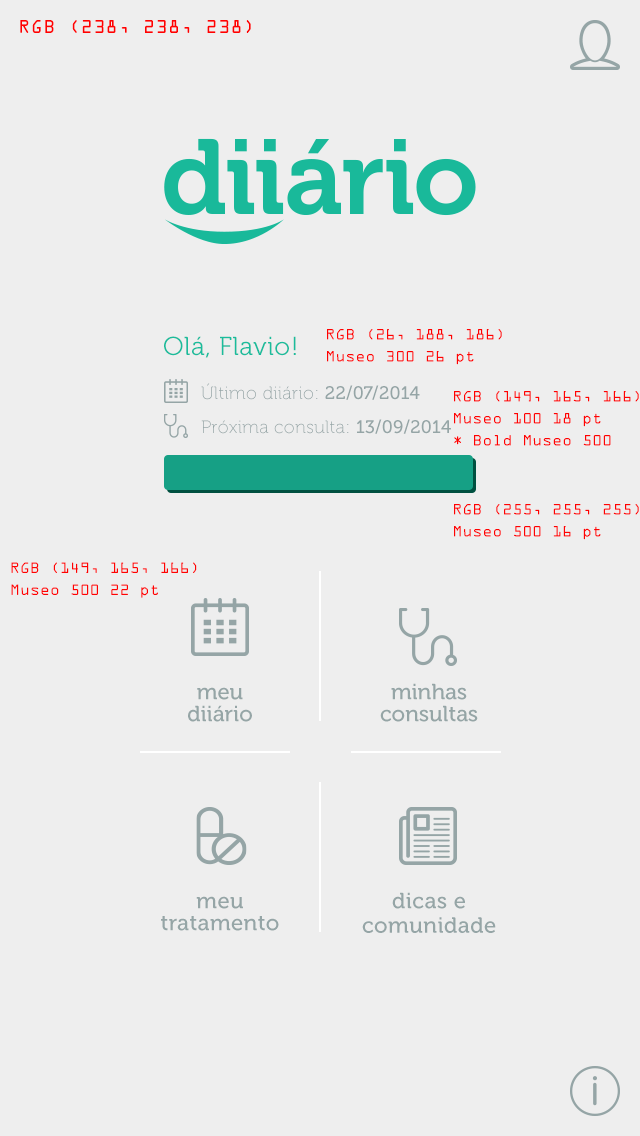
<style>
.page{position:relative;width:640px;height:1136px;background:#eeeeee}
.page>*{position:absolute;margin:0}
.t1{font:20px "OCRAExtended";letter-spacing:0.02em;color:#ff0101}
.t2{font:16px/22px "OCRAExtended";letter-spacing:0.02em;color:#ff0101}
.t3{font:26px "Museo300-Regular";letter-spacing:0.02em;color:#1abc9c}
.t4{font:18px "Museo100-Regular";letter-spacing:0.02em;color:#95a5a6}
.t5{font:18px "Museo500-Regular";letter-spacing:0.02em;color:#95a5a6}
.t6{font:22px/22px "Museo500-Regular";color:#95a5a6}
.t7{font:22px/24.5px "Museo500-Regular";letter-spacing:0.02em;color:#95a5a6}
.t8{font:22px/22px "Museo500-Regular";letter-spacing:0.02em;color:#95a5a6}
</style>
<div class="page">
<p class="t1" style="left:20px;top:20px;width:231px;height:13px">RGB (238, 238, 238)</p>
<p class="t2" style="left:327px;top:329px;width:175px;height:36px">RGB (26, 188, 186)<br>Museo 300 26 pt</p>
<p class="t3" style="left:164px;top:336px;width:132px;height:22px">Olá, Flavio!</p>
<p class="t4" style="left:201px;top:383px;width:219px;height:17px">Último diiário: <span class="t5">22/07/2014</span></p>
<p class="t2" style="left:454px;top:391px;width:185px;height:55px">RGB (149, 165, 166)<br>Museo 100 18 pt<br>* Bold Museo 500</p>
<p class="t4" style="left:201px;top:419px;width:250px;height:15px">Próxima consulta: <span class="t5">13/09/2014</span></p>
<p class="t2" style="left:454px;top:504px;width:185px;height:36px">RGB (255, 255, 255)<br>Museo 500 16 pt</p>
<p class="t2" style="left:11px;top:562px;width:186px;height:36px">RGB (149, 165, 166)<br>Museo 500 22 pt</p>
<p class="t6" style="left:188px;top:687px;width:64px;height:35px;text-align:center">meu<br>diiário</p>
<p class="t6" style="left:380px;top:683px;width:98px;height:39px;text-align:center">minhas<br>consultas</p>
<p class="t7" style="left:362px;top:892px;width:134px;height:41px;text-align:center">dicas e<br>comunidade</p>
<p class="t8" style="left:161px;top:896px;width:118px;height:35px;text-align:center">meu<br>tratamento</p>
</div>
